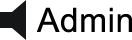
<style>
.page{position:relative;width:132px;height:40px;background:#ffffff}
.page>*{position:absolute;margin:0}
.t1{font:33.4px "ArialMT";letter-spacing:0.018em;color:#000000}
</style>
<div class="page">
<p class="t1" style="left:37px;top:7px;width:95px;height:26px">Admin</p>
</div>
